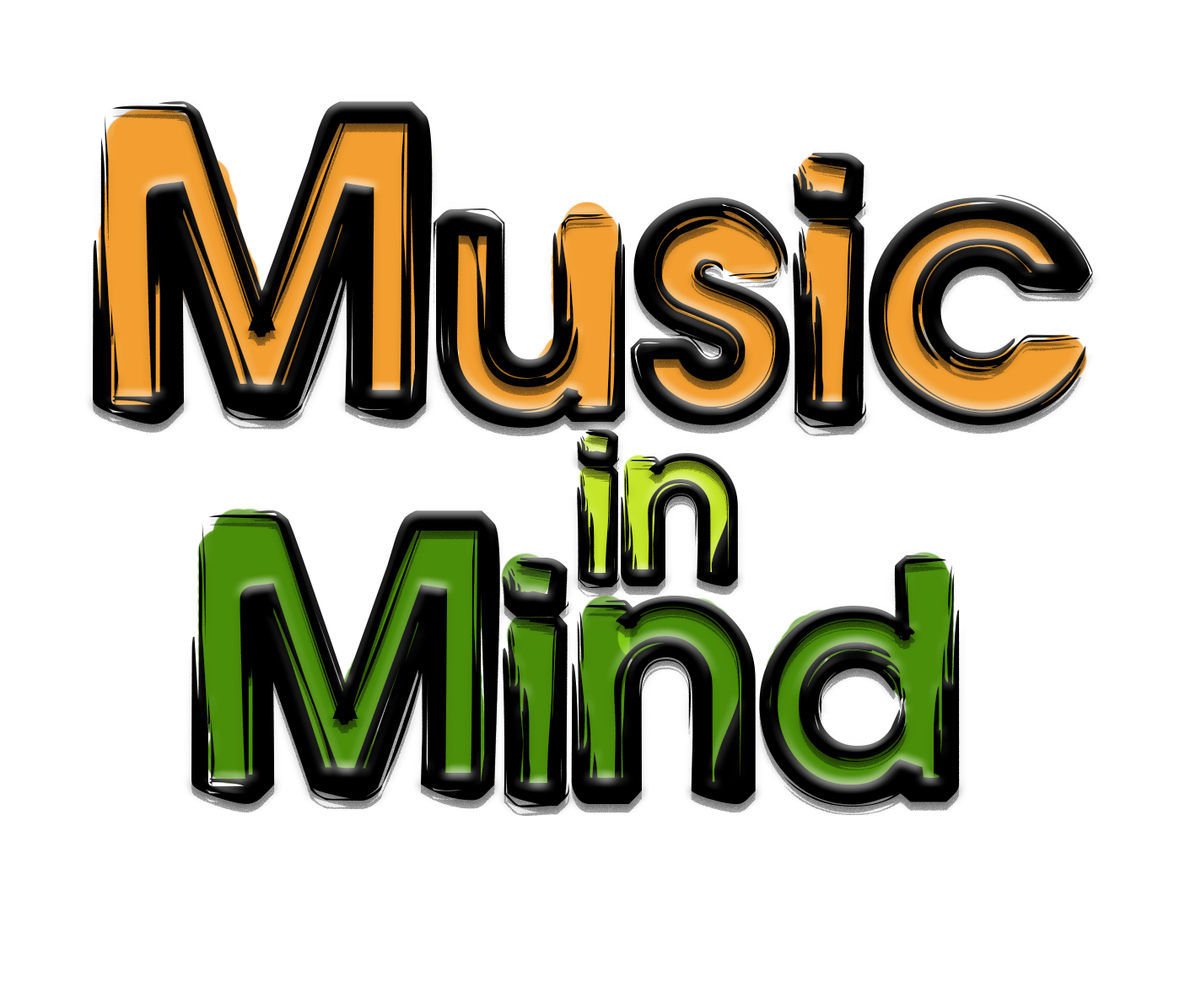
<style>
.page{position:relative;width:1201px;height:993px;background:#ffffff}
.page>*{position:absolute;margin:0}
.t1{font:322.8px "BennyBlanco";color:#000000}
.t2{font:186.7px "BennyBlanco";color:#000000}
.t3{font:293.5px "BennyBlanco";color:#000000}
</style>
<div class="page">
<p class="t1" style="left:93px;top:101px;width:1000px;height:327px">Music</p>
<p class="t2" style="left:577px;top:429px;width:161px;height:159px">in</p>
<p class="t3" style="left:191px;top:509px;width:769px;height:298px">Mind</p>
</div>
